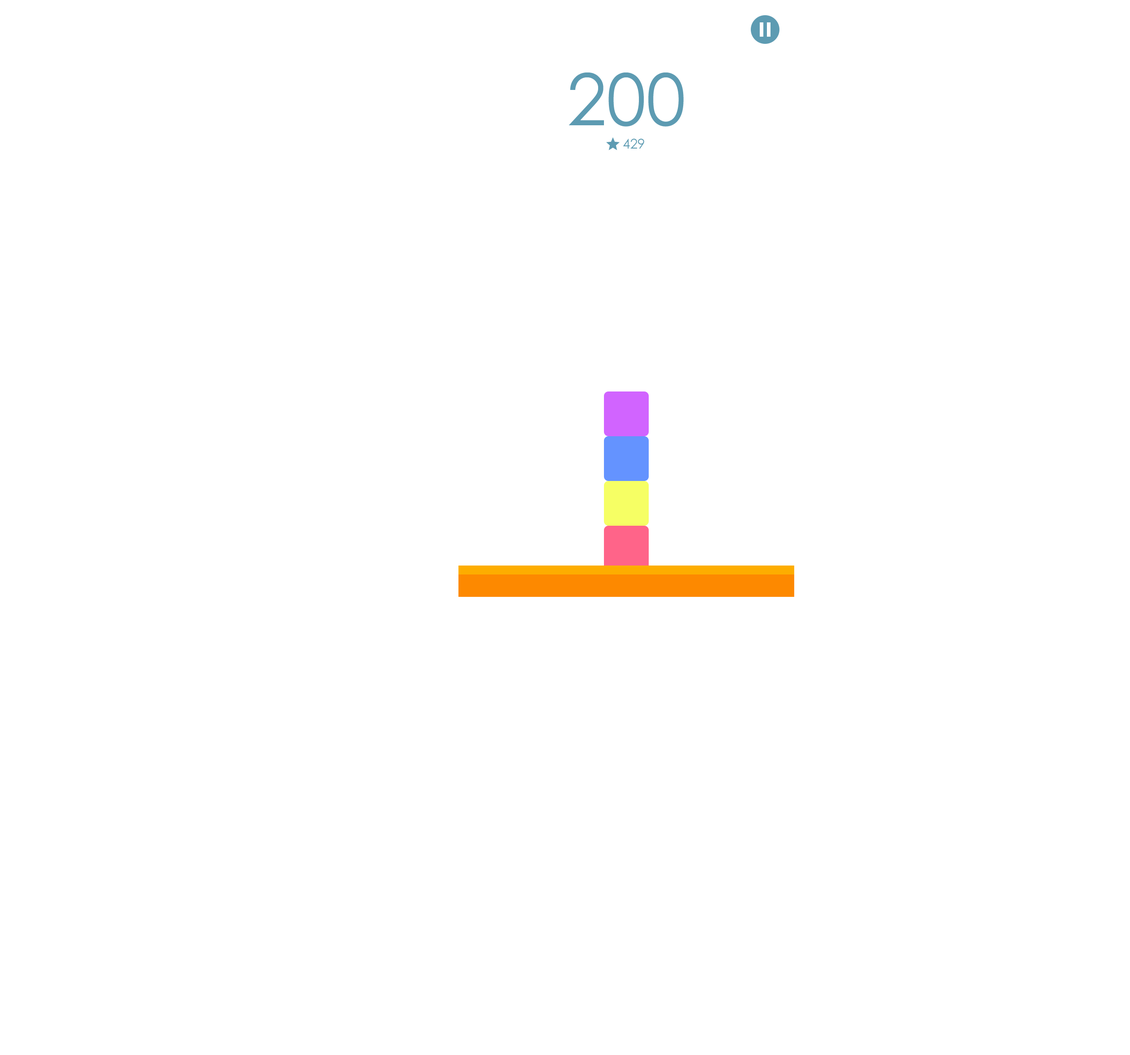
<style>
.page{position:relative;width:1130px;height:1055px;background:#ffffff}
.page>*{position:absolute;margin:0}
.t1{font:71.6px "CenturyGothic";color:#5d9bb2}
.t2{font:13.4px "CenturyGothic";color:#5d9bb2}
</style>
<div class="page">
<p class="t1" style="left:568px;top:73px;width:116px;height:54px">200</p>
<p class="t2" style="left:623px;top:139px;width:21px;height:10px">429</p>
</div>
